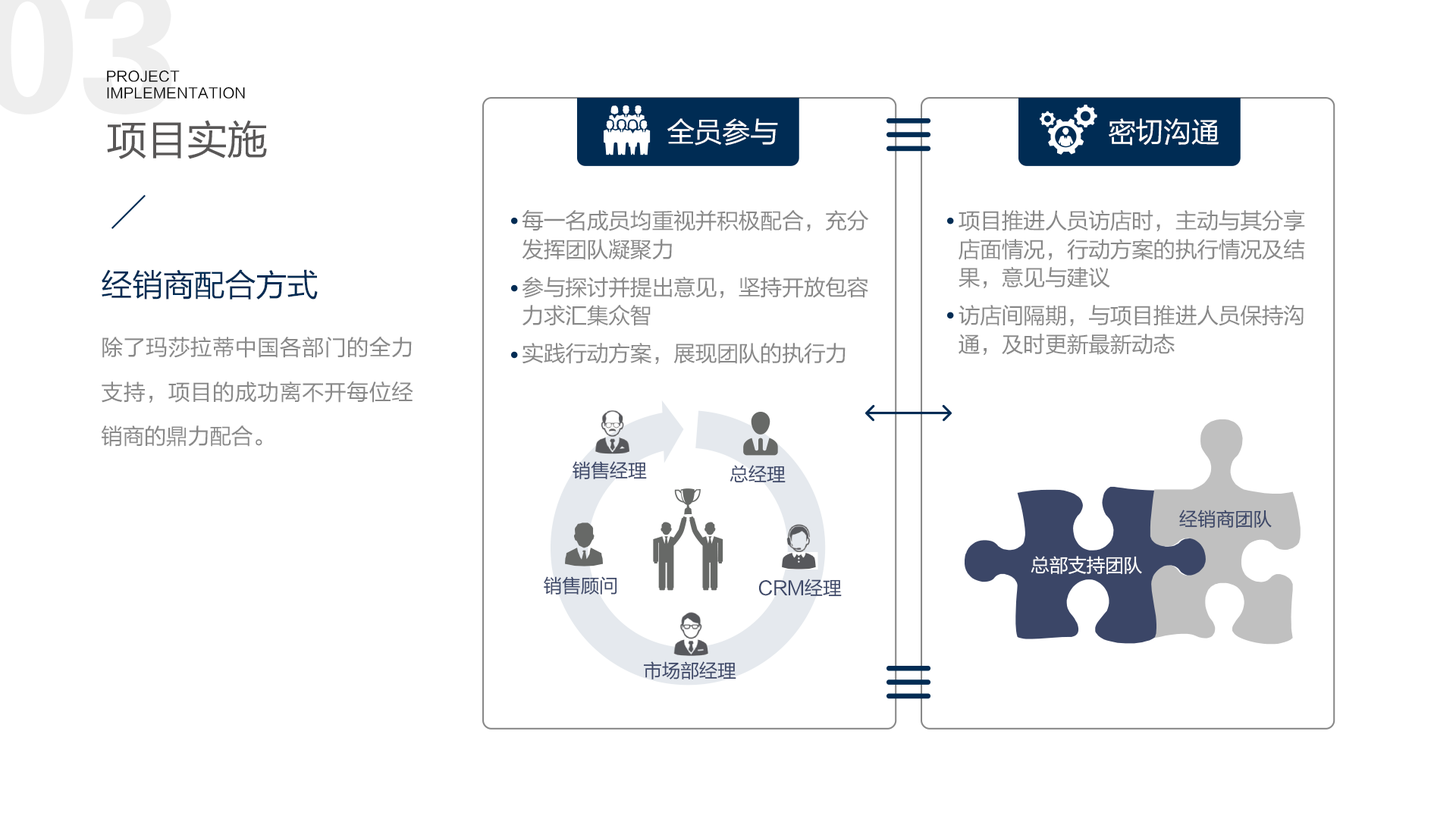
<style>
.page{position:relative;width:1456px;height:819px;background:#ffffff}
.page>*{position:absolute;margin:0}
.t1{font:14.1px "FZLTHJW--GB1-0";letter-spacing:0.02em;color:#000000}
.t2{font:41.1px "FZLTHJW--GB1-0";letter-spacing:-0.02em;color:#595757}
.t3{font:28.4px "FZLTHJW--GB1-0";letter-spacing:-0.02em;color:#ffffff}
.t4{font:22.1px/28.4px "FZLTHJW--GB1-0";letter-spacing:-0.02em;color:#888888}
.t5{font:22.1px/9.5px "FZLTHJW--GB1-0";letter-spacing:-0.02em;color:#888888}
.t6{font:22.1px/37.9px "FZLTHJW--GB1-0";letter-spacing:-0.02em;color:#888888}
.t7{font:31.6px "FZLTHJW--GB1-0";letter-spacing:-0.02em;color:#002c54}
.t8{font:22.1px/44.2px "FZLTHJW--GB1-0";letter-spacing:-0.02em;color:#888888}
.t9{font:19px "FZLTHJW--GB1-0";letter-spacing:-0.02em;color:#3b4667}
.t10{font:19px "FZLTHJW--GB1-0";letter-spacing:-0.02em;color:#ffffff}
</style>
<div class="page">
<p class="t1" style="left:107px;top:70px;width:138px;height:29px">PROJECT <br>IMPLEMENTATION</p>
<p class="t2" style="left:107px;top:120px;width:160px;height:39px">项目实施</p>
<p class="t3" style="left:667px;top:118px;width:111px;height:28px">全员参与</p>
<p class="t3" style="left:1109px;top:118px;width:110px;height:28px">密切沟通</p>
<p class="t4" style="left:959px;top:209px;width:346px;height:147px">项目推进人员访店时，主动与其分享<br>店面情况，行动方案的执行情况及结<br>果，意见与建议<br><br><span class="t5">访店间隔期，与项目推进人员保持沟<br></span>通，及时更新最新动态</p>
<p class="t4" style="left:522px;top:210px;width:346px;height:155px">每一名成员均重视并积极配合，充分<br>发挥团队凝聚力<br><span class="t6">参与探讨并提出意见，坚持开放包容<br></span>力求汇集众智<br><span class="t6">实践行动方案，展现团队的执行力</span></p>
<p class="t7" style="left:102px;top:269px;width:216px;height:31px">经销商配合方式</p>
<p class="t8" style="left:102px;top:336px;width:311px;height:111px;text-align:justify">除了玛莎拉蒂中国各部门的全力支持，项目的成功离不开每位经销商的鼎力配合。</p>
<p class="t9" style="left:573px;top:461px;width:74px;height:18px">销售经理</p>
<p class="t9" style="left:730px;top:465px;width:56px;height:18px">总经理</p>
<p class="t9" style="left:1179px;top:510px;width:93px;height:19px">经销商团队</p>
<p class="t10" style="left:1031px;top:556px;width:111px;height:19px">总部支持团队</p>
<p class="t9" style="left:544px;top:576px;width:73px;height:19px">销售顾问</p>
<p class="t9" style="left:758px;top:579px;width:84px;height:18px">CRM经理</p>
<p class="t9" style="left:643px;top:661px;width:93px;height:18px">市场部经理</p>
</div>
